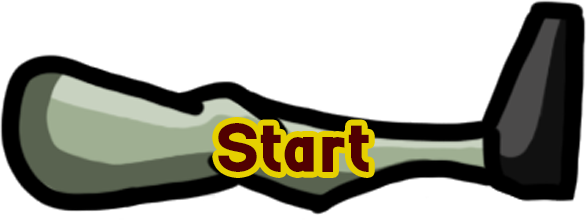
<style>
.page{position:relative;width:586px;height:220px;background:#ffffff}
.page>*{position:absolute;margin:0}
.t1{font:84.6px "ZPAllAround-Bold";color:#510001}
</style>
<div class="page">
<p class="t1" style="left:218px;top:123px;width:151px;height:49px">Start</p>
</div>
